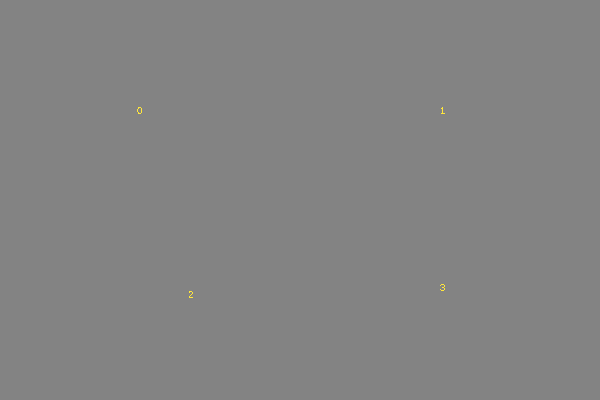
<style>
.page{position:relative;width:600px;height:400px;background:#838383}
.page>*{position:absolute;margin:0}
.t1{font:9px "Nunito-Regular";letter-spacing:-0.019em;color:#ffe63c}
</style>
<div class="page">
<p class="t1" style="left:137px;top:107px;width:5px;height:7px">0</p>
<p class="t1" style="left:441px;top:107px;width:4px;height:7px">1</p>
<p class="t1" style="left:189px;top:291px;width:4px;height:7px">2</p>
<p class="t1" style="left:440px;top:284px;width:5px;height:7px">3</p>
</div>
